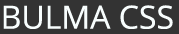
<style>
.page{position:relative;width:179px;height:34px;background:#333333}
.page>*{position:absolute;margin:0}
.t1{font:32px "OpenSans";color:#f8fefe}
</style>
<div class="page">
<p class="t1" style="left:3px;top:5px;width:170px;height:24px">BULMA CSS</p>
</div>
